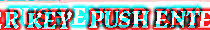
<style>
.page{position:relative;width:210px;height:30px}
.page>*{position:absolute;margin:0}
.t1{font:25px "Vatican-Bold"}
</style>
<div class="page">
<p class="t1" style="left:7px;top:7px;width:193px;height:18px">PUSH ENTER KEY</p>
</div>
